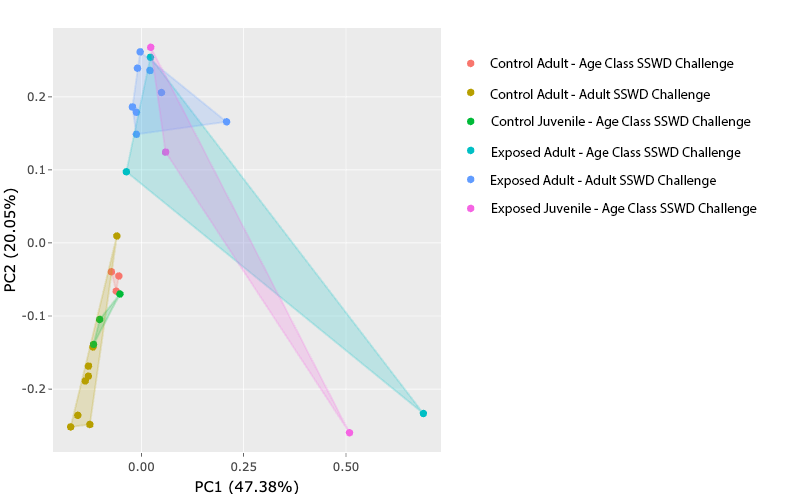
<style>
.page{position:relative;width:800px;height:494px;background:#ffffff}
.page>*{position:absolute;margin:0}
.t1{font:14px "MyriadPro-Regular";color:#000000}
</style>
<div class="page">
<p class="t1" style="left:490px;top:58px;width:244px;height:13px">Control Adult - Age Class SSWD Challenge</p>
<p class="t1" style="left:490px;top:89px;width:220px;height:13px">Control Adult - Adult SSWD Challenge</p>
<p class="t1" style="left:491px;top:116px;width:260px;height:13px">Control Juvenile - Age Class SSWD Challenge</p>
<p class="t1" style="left:492px;top:147px;width:249px;height:13px">Exposed Adult - Age Class SSWD Challenge</p>
<p class="t1" style="left:491px;top:175px;width:225px;height:13px">Exposed Adult - Adult SSWD Challenge</p>
<p class="t1" style="left:492px;top:203px;width:265px;height:13px">Exposed Juvenile - Age Class SSWD Challenge</p>
</div>
